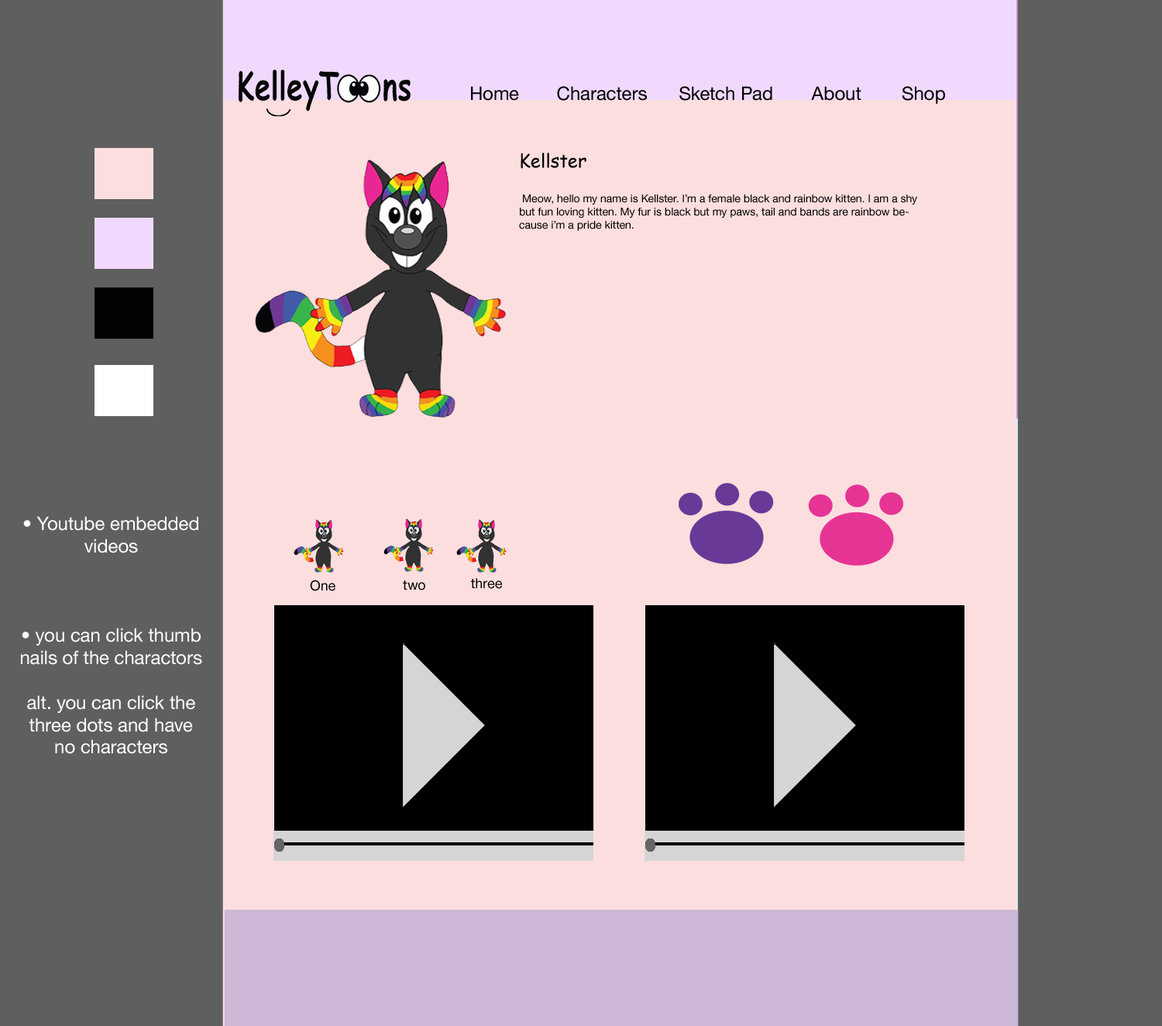
<style>
.page{position:relative;width:1162px;height:1026px;background:#fddede}
.page>*{position:absolute;margin:0}
.t1{font:18.6px "HelveticaNeue";color:#000000}
.t2{font:10.8px "HelveticaNeue";color:#000000}
.t3{font:18.6px "ComicSansMS";color:#000000}
.t4{font:18.6px "HelveticaNeue";color:#ffffff}
.t5{font:13.9px "HelveticaNeue";color:#000000}
</style>
<div class="page">
<p class="t1" style="left:471px;top:86px;width:48px;height:15px">Home</p>
<p class="t1" style="left:557px;top:86px;width:90px;height:15px">Characters</p>
<p class="t1" style="left:680px;top:86px;width:93px;height:15px">Sketch Pad</p>
<p class="t1" style="left:811px;top:86px;width:51px;height:15px">About</p>
<p class="t1" style="left:902px;top:86px;width:43px;height:18px">Shop</p>
<p class="t2" style="left:519px;top:153px;width:398px;height:78px"><span class="t3">Kellster<br><br></span> Meow, hello my name is Kellster. I’m a female black and rainbow kitten. I am a shy but fun loving kitten. My fur is black but my paws, tail and bands are rainbow because i’m a pride kitten.</p>
<p class="t4" style="left:21px;top:516px;width:181px;height:238px;text-align:center">• Youtube embedded videos<br><br><br><br>• you can click thumb nails of the charactors <br><br>alt. you can click the three dots and have no characters</p>
<p class="t5" style="left:310px;top:580px;width:26px;height:11px">One</p>
<p class="t5" style="left:403px;top:580px;width:22px;height:10px">two</p>
<p class="t5" style="left:471px;top:578px;width:31px;height:11px">three</p>
</div>
